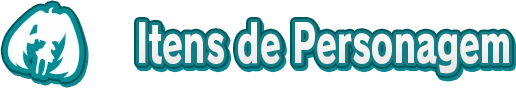
<style>
.page{position:relative;width:516px;height:88px;background:#ffffff}
.page>*{position:absolute;margin:0}
.t1{font:52px "RodinPro-EB";color:#f2f3f3;scale:0.65 1}
</style>
<div class="page">
<p class="t1" style="left:139px;top:22px;width:370px;height:52px">Itens de Personagem</p>
</div>
